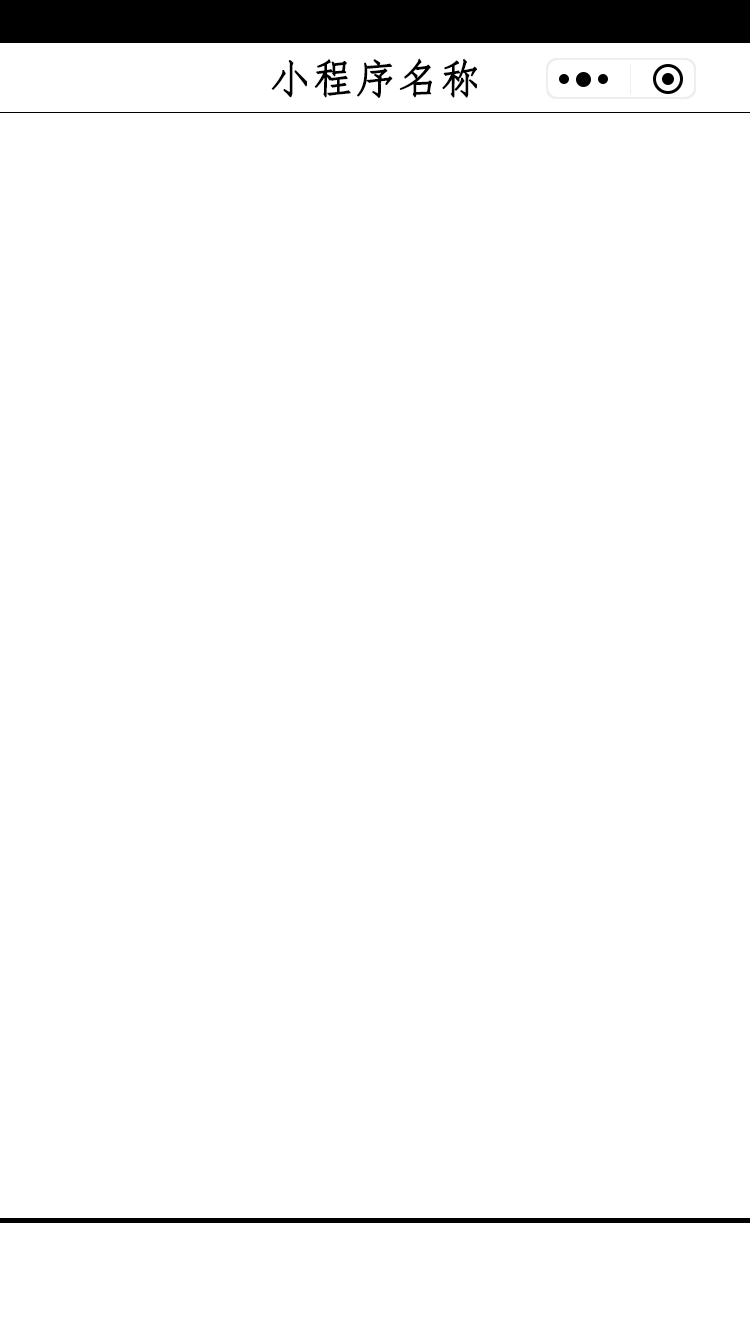
<style>
.page{position:relative;width:750px;height:1334px;background:#ffffff}
.page>*{position:absolute;margin:0}
.t1{font:40.7px "FangSong";letter-spacing:0.02em;color:#000000;font-weight:bold}
</style>
<div class="page">
<p class="t1" style="left:271px;top:58px;width:206px;height:40px">小程序名称</p>
</div>
